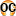
<style>
.page{position:relative;width:16px;height:16px;background:#ffffff}
.page>*{position:absolute;margin:0}
.t1{font:12px "Roboto-Black";color:#000000}
</style>
<div class="page">
<p class="t1" style="left:0px;top:3px;width:16px;height:9px">OC</p>
</div>
